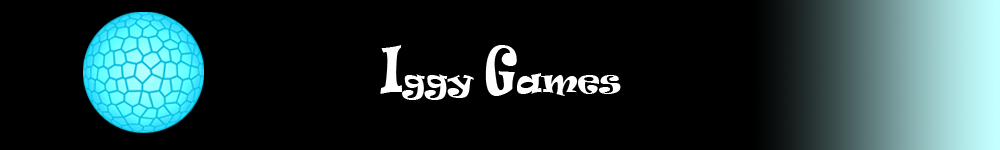
<style>
.page{position:relative;width:1000px;height:150px;background:#000000}
.page>*{position:absolute;margin:0}
.t1{font:30px "Ravie";color:#fffefe}
.t2{font:60px "Ravie";color:#fffefe;scale:0.67 1}
</style>
<div class="page">
<p class="t1" style="left:380px;top:45px;width:241px;height:55px"><span class="t2">I</span>ggy <span class="t2">G</span>ames</p>
<p class="t1" style="left:380px;top:45px;width:241px;height:55px"><span class="t2">I</span>ggy <span class="t2">G</span>ames</p>
</div>
